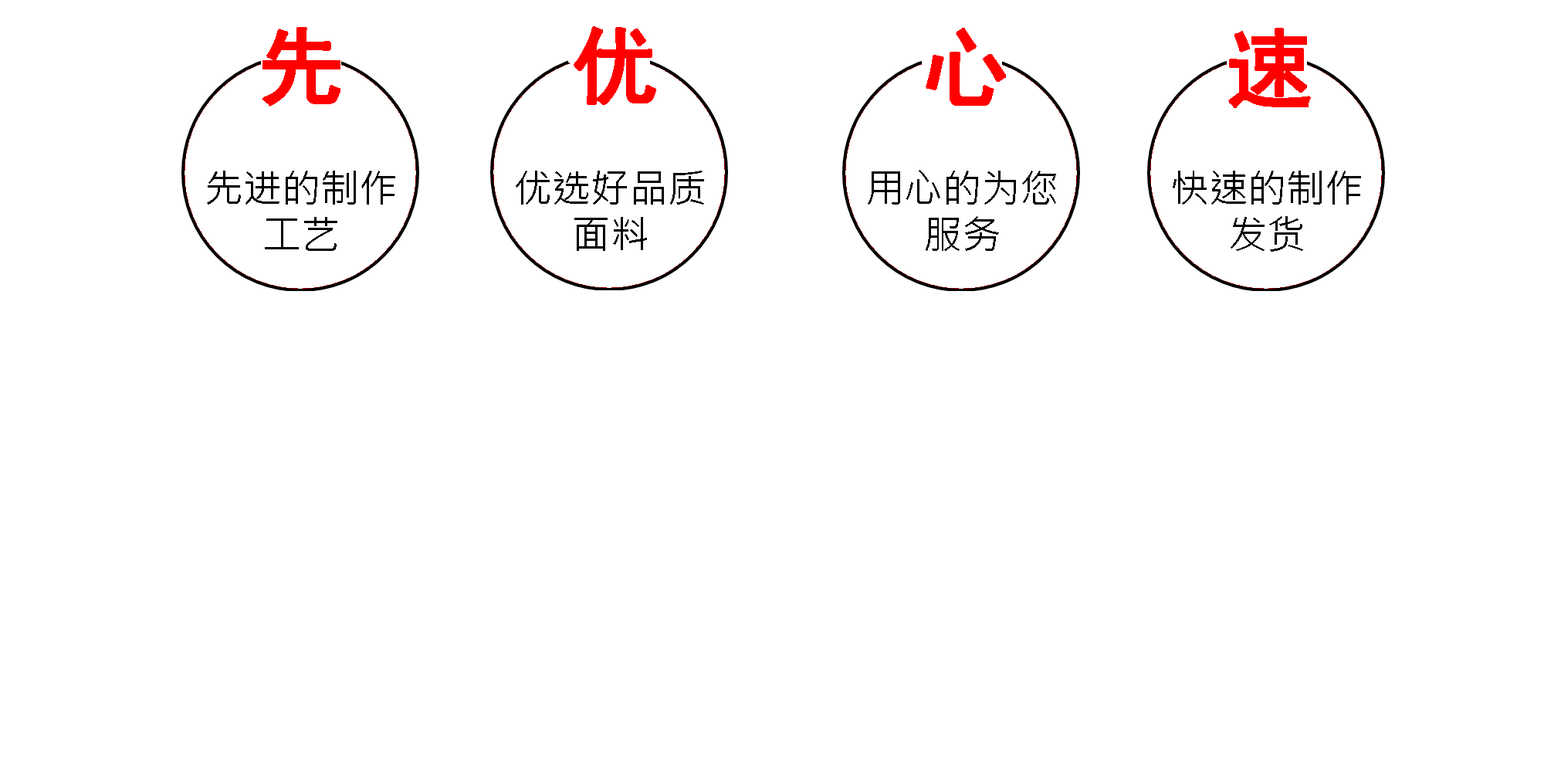
<style>
.page{position:relative;width:1544px;height:772px;background:#ffffff}
.page>*{position:absolute;margin:0}
.t1{font:84.9px "SimHei";color:#ff0000;font-weight:bold}
.t2{font:38.6px/46.3px "MicrosoftJhengHeiRegular";color:#000000}
</style>
<div class="page">
<p class="t1" style="left:263px;top:27px;width:78px;height:80px">先</p>
<p class="t1" style="left:574px;top:26px;width:82px;height:79px">优</p>
<p class="t1" style="left:926px;top:28px;width:80px;height:78px">心</p>
<p class="t1" style="left:1228px;top:28px;width:83px;height:80px">速</p>
<p class="t2" style="left:207px;top:171px;width:188px;height:80px;text-align:center">先进的制作<br>工艺</p>
<p class="t2" style="left:516px;top:171px;width:188px;height:80px;text-align:center">优选好品质<br>面料</p>
<p class="t2" style="left:868px;top:170px;width:188px;height:81px;text-align:center">用心的为您<br>服务</p>
<p class="t2" style="left:1173px;top:171px;width:188px;height:81px;text-align:center">快速的制作<br>发货</p>
</div>
